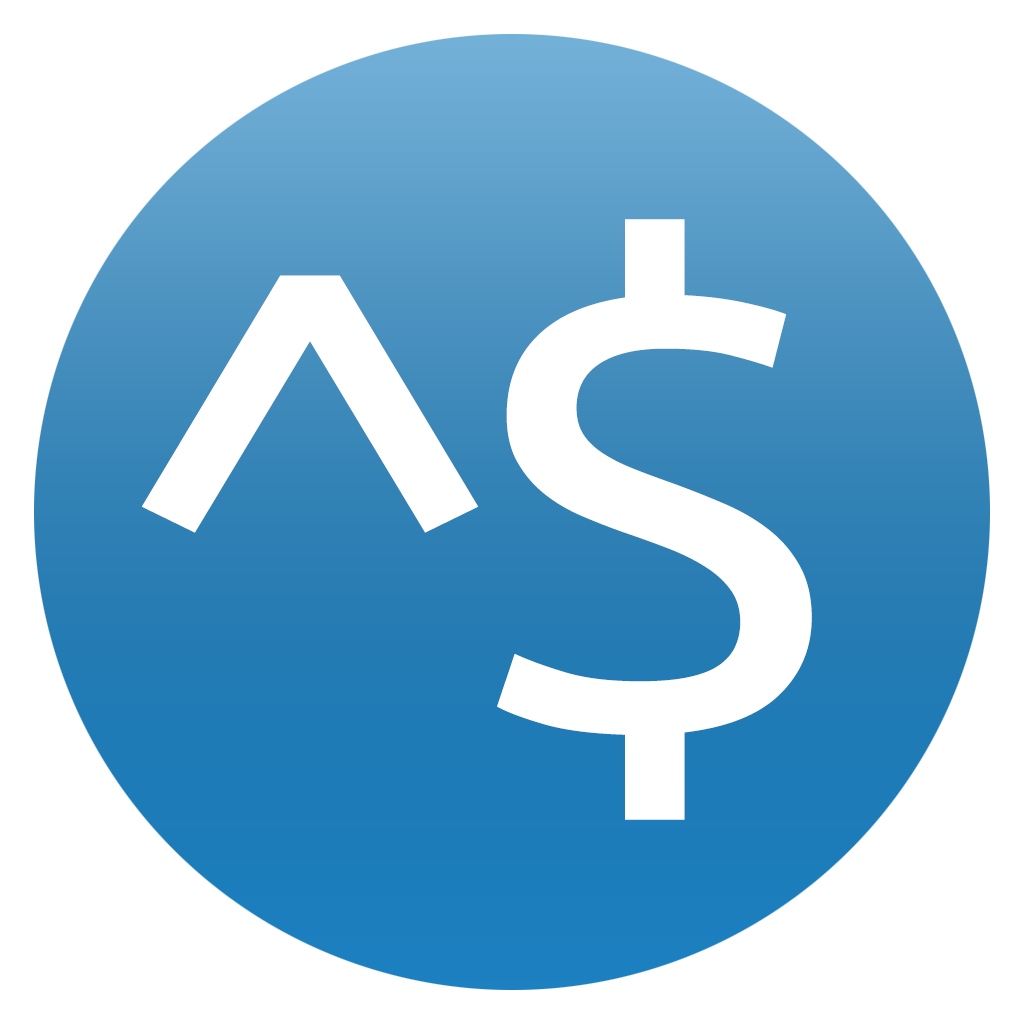
<style>
.page{position:relative;width:1024px;height:1024px;background:#ffffff}
.page>*{position:absolute;margin:0}
.t1{font:760px "UbuntuMono-Regular";letter-spacing:-0.07em;color:#ffffff;scale:1.05 1}
</style>
<div class="page">
<p class="t1" style="left:142px;top:219px;width:670px;height:601px">^$</p>
</div>
